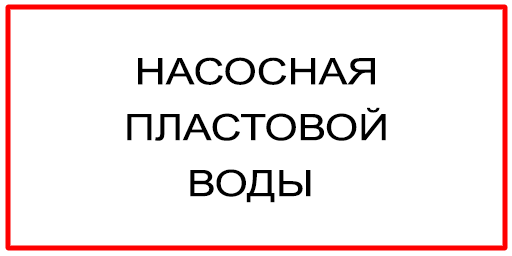
<style>
.page{position:relative;width:512px;height:256px;background:#ffffff}
.page>*{position:absolute;margin:0}
.t1{font:36.5px/55.9px "ArialMT";color:#000000;scale:1.17 1}
</style>
<div class="page">
<p class="t1" style="left:127px;top:57px;width:259px;height:146px;text-align:center">НАСОСНАЯ<br>ПЛАСТОВОЙ<br>ВОДЫ</p>
</div>
